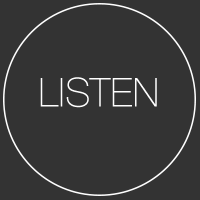
<style>
.page{position:relative;width:200px;height:200px;background:#333333}
.page>*{position:absolute;margin:0}
.t1{font:40px "HelveticaNeue-Thin";color:#ffffff}
</style>
<div class="page">
<p class="t1" style="left:40px;top:77px;width:117px;height:31px">LISTEN</p>
</div>
